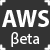
<style>
.page{position:relative;width:50px;height:50px;background:#333333}
.page>*{position:absolute;margin:0}
.t1{font:24px "MyriadPro-Bold";color:#ffffff}
.t2{font:16px "MyriadPro-Regular";color:#ffffff}
</style>
<div class="page">
<p class="t1" style="left:2px;top:10px;width:47px;height:17px">AWS</p>
<p class="t2" style="left:11px;top:32px;width:29px;height:15px">βeta</p>
</div>
